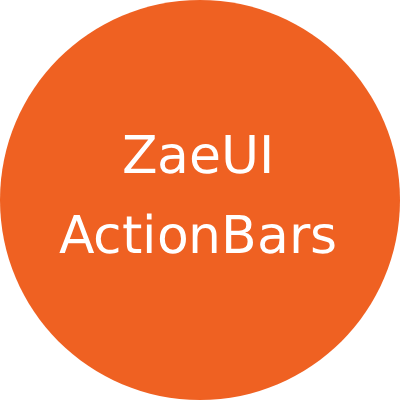
<style>
.page{position:relative;width:400px;height:400px;background:#ef6122}
.page>*{position:absolute;margin:0}
.t1{font:52px "DejaVuSans";color:#ffffff}
</style>
<div class="page">
<p class="t1" style="left:59px;top:135px;width:276px;height:119px;text-align:center">ZaeUI<br><br>ActionBars</p>
</div>
